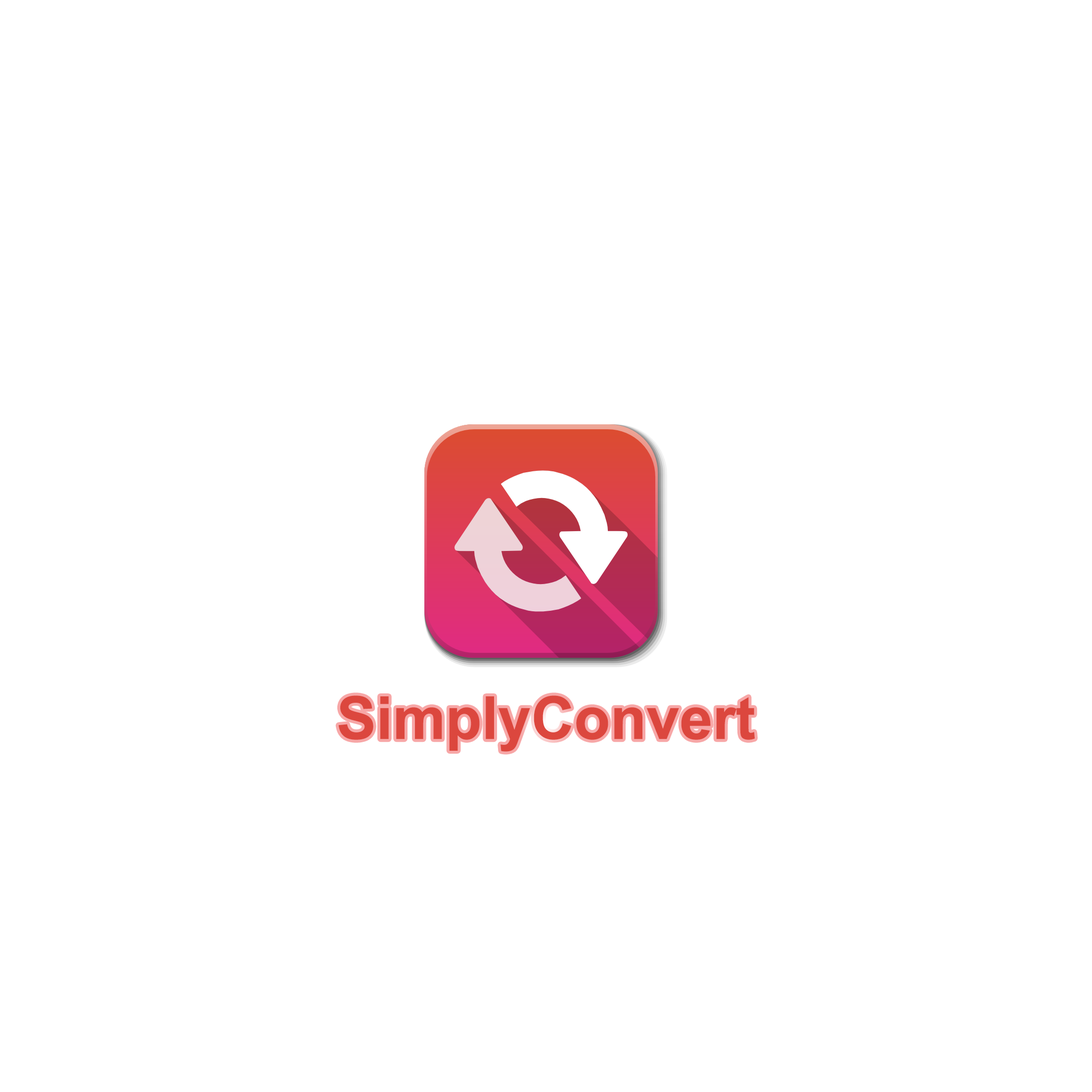
<style>
.page{position:relative;width:1092px;height:1092px;background:#ffffff}
.page>*{position:absolute;margin:0}
.t1{font:59.3px "Arial-BoldMT";color:#dc473e}
</style>
<div class="page">
<p class="t1" style="left:338px;top:695px;width:417px;height:57px">SimplyConvert</p>
</div>
